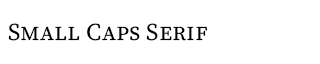
<style>
.page{position:relative;width:320px;height:64px;background:#ffffff}
.page>*{position:absolute;margin:0}
.t1{font:24px "SourceSerifRoman-Regular";color:#000000;font-variant:small-caps}
</style>
<div class="page">
<p class="t1" style="left:8px;top:23px;width:200px;height:18px">Small Caps Serif</p>
</div>
